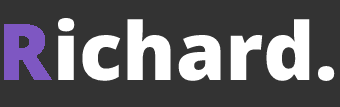
<style>
.page{position:relative;width:340px;height:107px;background:#333333}
.page>*{position:absolute;margin:0}
.t1{font:80px "OpenSans-ExtraBold";color:#ffffff}
</style>
<div class="page">
<p class="t1" style="left:58px;top:18px;width:277px;height:63px">ichard.</p>
</div>
